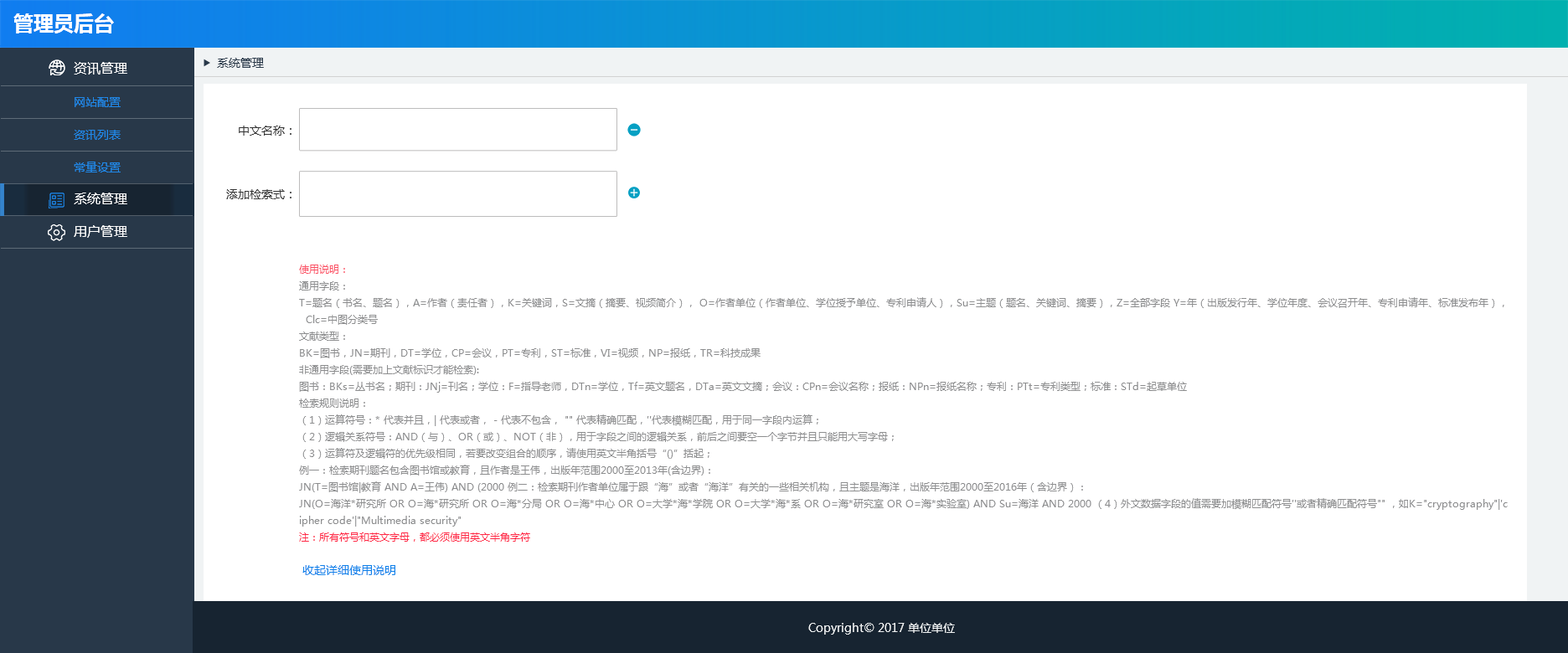
<style>
.page{position:relative;width:1568px;height:653px;background:#ffffff}
.page>*{position:absolute;margin:0}
.t1{font:20.1px "MicrosoftYaHei-Bold";color:#ffffff}
.t2{font:13.4px/32.7px "MicrosoftYaHei";color:#ffffff}
.t3{font:11.7px "MicrosoftYaHei";color:#283849}
.t4{font:11.7px/32.7px "MicrosoftYaHei";color:#2089ea}
.t5{font:11.7px "MicrosoftYaHei";color:#333333}
.t6{font:10.1px/16.8px "MicrosoftYaHei";color:#8d8e8f}
.t7{font:10.1px/16.8px "MicrosoftYaHei";color:#fb5165}
.t8{font:10.1px/16.8px "MicrosoftYaHei";color:#ff2947}
.t9{font:11.7px/16.8px "MicrosoftYaHei";color:#0f82ea}
.t10{font:11.7px "MicrosoftYaHei";color:#f0f3f4}
</style>
<div class="page">
<p class="t1" style="left:13px;top:13px;width:101px;height:21px">管理员后台</p>
<p class="t2" style="left:74px;top:62px;width:53px;height:176px">资讯管理<br><br><br><br>系统管理<br>用户管理</p>
<p class="t3" style="left:217px;top:58px;width:47px;height:10px">系统管理</p>
<p class="t4" style="left:74px;top:97px;width:47px;height:76px">网站配置<br>资讯列表<br>常量设置</p>
<p class="t5" style="left:239px;top:126px;width:52px;height:10px">中文名称：</p>
<p class="t5" style="left:226px;top:189px;width:65px;height:10px">添加检索式：</p>
<p class="t6" style="left:299px;top:265px;width:1209px;height:310px"><span class="t7">使用说明：<br></span>通用字段：<br>T=题名（书名、题名），A=作者（责任者），K=关键词，S=文摘（摘要、视频简介）， O=作者单位（作者单位、学位授予单位、专利申请人），Su=主题（题名、关键词、摘要），Z=全部字段 Y=年（出版发行年、学位年度、会议召开年、专利申请年、标准发布年），<br>  Clc=中图分类号<br>文献类型：<br>BK=图书，JN=期刊，DT=学位，CP=会议，PT=专利，ST=标准，VI=视频，NP=报纸，TR=科技成果<br>非通用字段(需要加上文献标识才能检索):<br>图书：BKs=丛书名；期刊：JNj=刊名；学位：F=指导老师，DTn=学位，Tf=英文题名，DTa=英文文摘；会议：CPn=会议名称；报纸：NPn=报纸名称；专利：PTt=专利类型；标准：STd=起草单位<br>检索规则说明：<br>（1）运算符号：* 代表并且，| 代表或者， - 代表不包含， "" 代表精确匹配，''代表模糊匹配，用于同一字段内运算；<br>（2）逻辑关系符号：AND（与）、OR（或）、NOT（非），用于字段之间的逻辑关系，前后之间要空一个字节并且只能用大写字母；<br>（3）运算符及逻辑符的优先级相同，若要改变组合的顺序，请使用英文半角括号“()”括起；<br>例一：检索期刊题名包含图书馆或教育，且作者是王伟，出版年范围2000至2013年(含边界)：<br>JN(T=图书馆|教育 AND A=王伟) AND (2000 例二：检索期刊作者单位属于跟“海”或者“海洋”有关的一些相关机构，且主题是海洋，出版年范围2000至2016年（含边界）：<br>JN(O=海洋*研究所 OR O=海*研究所 OR O=海*分局 OR O=海*中心 OR O=大学*海*学院 OR O=大学*海*系 OR O=海*研究室 OR O=海*实验室) AND Su=海洋 AND 2000 （4）外文数据字段的值需要加模糊匹配符号''或者精确匹配符号"" ，如K="cryptography"|'c<br>ipher code'|"Multimedia security"<br><span class="t8">注：所有符号和英文字母，都必须使用英文半角字符<br><br> </span><span class="t9">收起详细使用说明</span></p>
<p class="t10" style="left:808px;top:623px;width:147px;height:12px">Copyright© 2017 单位单位</p>
</div>
